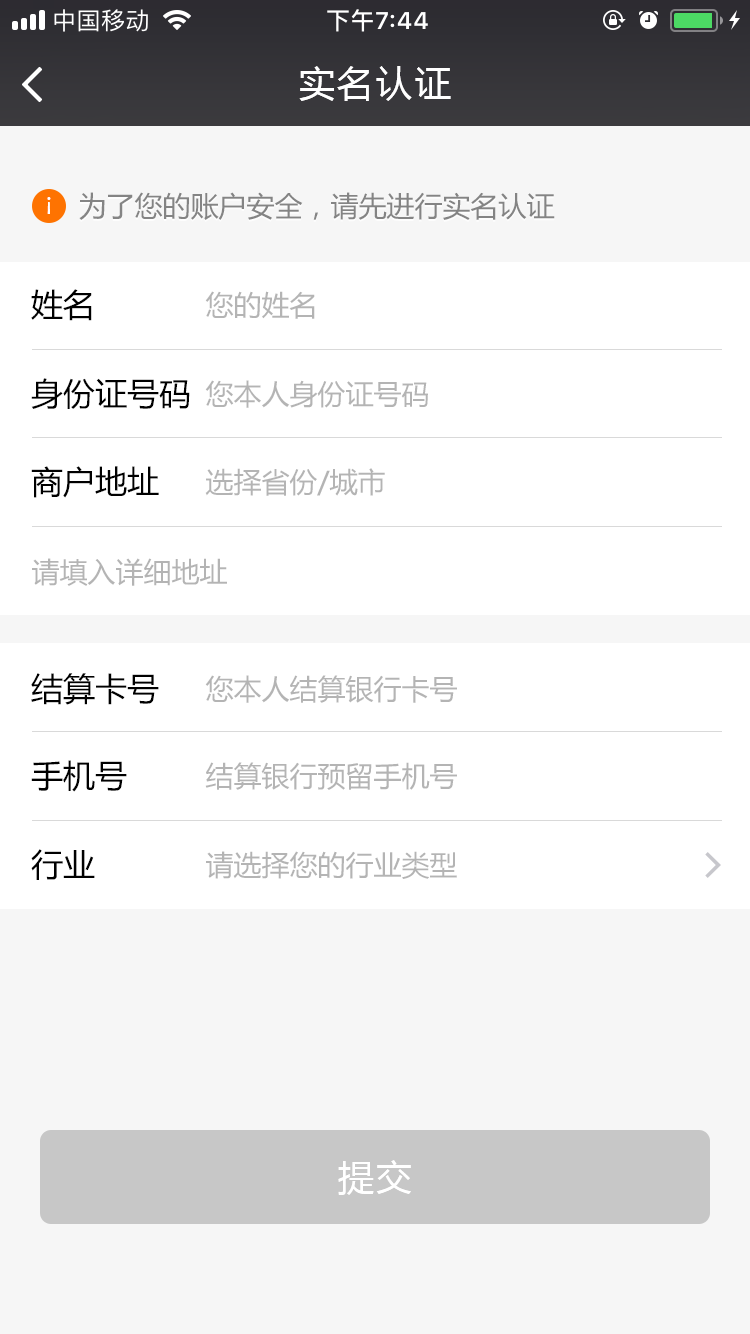
<style>
.page{position:relative;width:750px;height:1334px;background:#ffffff}
.page>*{position:absolute;margin:0}
.t1{font:36px "MicrosoftYaHei";letter-spacing:0.08em;color:#ffffff}
.t2{font:23.1px "MicrosoftYaHei";letter-spacing:0.08em;color:#ffffff}
.t3{font:28px "MicrosoftYaHei";color:#747474}
.t4{font:32px "MicrosoftYaHei";color:#000000}
.t5{font:28px "MicrosoftYaHei";color:#b4b4b4}
</style>
<div class="page">
<p class="t1" style="left:299px;top:66px;width:152px;height:35px">实名认证</p>
<p class="t2" style="left:47px;top:197px;width:4px;height:17px;rotate:180deg">！</p>
<p class="t3" style="left:79px;top:192px;width:476px;height:28px">为了您的账户安全，请先进行实名认证</p>
<p class="t4" style="left:31px;top:289px;width:61px;height:32px">姓名</p>
<p class="t5" style="left:205px;top:291px;width:110px;height:28px">您的姓名</p>
<p class="t4" style="left:31px;top:378px;width:159px;height:31px">身份证号码</p>
<p class="t5" style="left:205px;top:380px;width:223px;height:28px">您本人身份证号码</p>
<p class="t4" style="left:31px;top:466px;width:128px;height:32px">商户地址</p>
<p class="t5" style="left:205px;top:468px;width:180px;height:28px">选择省份/城市</p>
<p class="t5" style="left:32px;top:558px;width:195px;height:28px">请填入详细地址</p>
<p class="t4" style="left:31px;top:673px;width:128px;height:32px">结算卡号</p>
<p class="t5" style="left:205px;top:675px;width:252px;height:28px">您本人结算银行卡号</p>
<p class="t4" style="left:31px;top:760px;width:96px;height:32px">手机号</p>
<p class="t5" style="left:205px;top:762px;width:252px;height:28px">结算银行预留手机号</p>
<p class="t4" style="left:31px;top:849px;width:64px;height:31px">行业</p>
<p class="t5" style="left:206px;top:851px;width:251px;height:28px">请选择您的行业类型</p>
<p class="t1" style="left:338px;top:1160px;width:73px;height:35px">提交</p>
</div>
